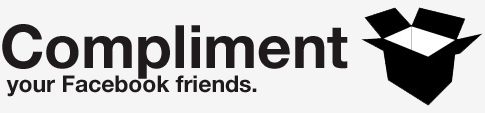
<style>
.page{position:relative;width:485px;height:113px;background:#f5f5f5}
.page>*{position:absolute;margin:0}
.t1{font:60px "HelveticaNeue-Bold";color:#1f1b1c}
.t2{font:22.9px "HelveticaNeue-Bold";color:#1f1b1c}
</style>
<div class="page">
<p class="t1" style="left:2px;top:24px;width:346px;height:55px">Compliment</p>
<p class="t2" style="left:6px;top:75px;width:251px;height:22px">your Facebook friends.</p>
</div>
